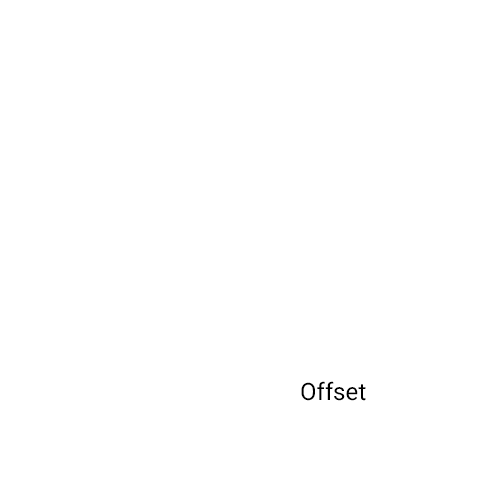
<style>
.page{position:relative;width:500px;height:500px;background:#ffffff}
.page>*{position:absolute;margin:0}
.t1{font:24px "Roboto-Regular";color:#000000}
</style>
<div class="page">
<p class="t1" style="left:301px;top:381px;width:65px;height:20px">Offset</p>
</div>
